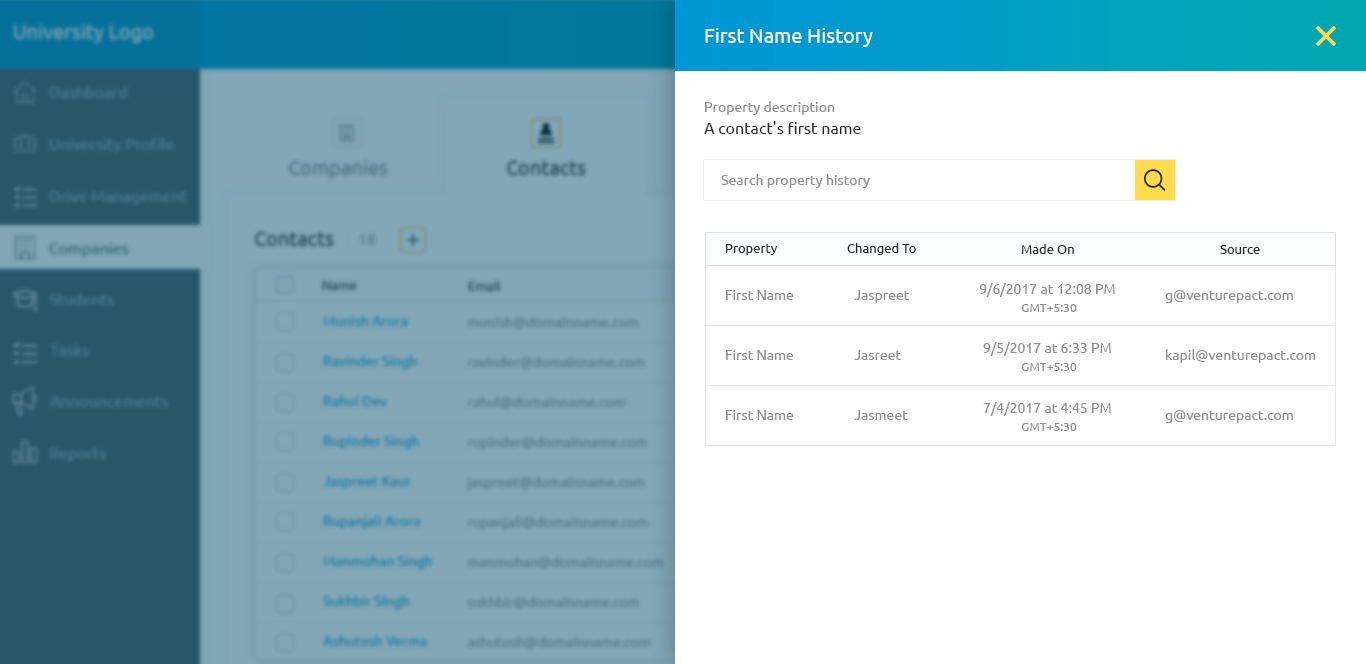
<style>
.page{position:relative;width:1366px;height:664px;background:#ffffff}
.page>*{position:absolute;margin:0}
.t1{font:20px "Ubuntu";color:#fafcfe}
.t2{font:16px/22px "Ubuntu";color:#282828}
.t3{font:14px/22px "Ubuntu";color:#909090}
.t4{font:14px "Ubuntu";color:#909090}
.t5{font:13px "Ubuntu";color:#282828}
.t6{font:14px/60px "Ubuntu";color:#909090}
.t7{font:14px/18px "Ubuntu";color:#909090}
.t8{font:12px/18px "Ubuntu";color:#909090}
</style>
<div class="page">
<p class="t1" style="left:705px;top:28px;width:168px;height:19px">First Name History</p>
<p class="t2" style="left:704px;top:101px;width:157px;height:33px"><span class="t3">Property description<br></span>A contact's first name</p>
<p class="t4" style="left:721px;top:174px;width:149px;height:14px">Search property history</p>
<p class="t5" style="left:726px;top:244px;width:52px;height:11px">Property</p>
<p class="t5" style="left:847px;top:243px;width:69px;height:12px">Changed To</p>
<p class="t5" style="left:1021px;top:244px;width:53px;height:10px">Made On</p>
<p class="t5" style="left:1220px;top:245px;width:40px;height:9px">Source</p>
<p class="t6" style="left:726px;top:290px;width:68px;height:130px">First Name<br>First Name<br>First Name</p>
<p class="t6" style="left:854px;top:290px;width:56px;height:130px">Jaspreet<br>Jasreet<br>Jasmeet</p>
<p class="t7" style="left:979px;top:283px;width:136px;height:29px;text-align:center">9/6/2017 at 12:08 PM <br><span class="t8">GMT+5:30</span></p>
<p class="t6" style="left:1165px;top:290px;width:151px;height:133px">g@venturepact.com<br>kapil@venturepact.com<br>g@venturepact.com</p>
<p class="t7" style="left:983px;top:342px;width:128px;height:29px;text-align:center">9/5/2017 at 6:33 PM <br><span class="t8">GMT+5:30</span></p>
<p class="t7" style="left:983px;top:402px;width:128px;height:29px;text-align:center">7/4/2017 at 4:45 PM <br><span class="t8">GMT+5:30</span></p>
</div>
